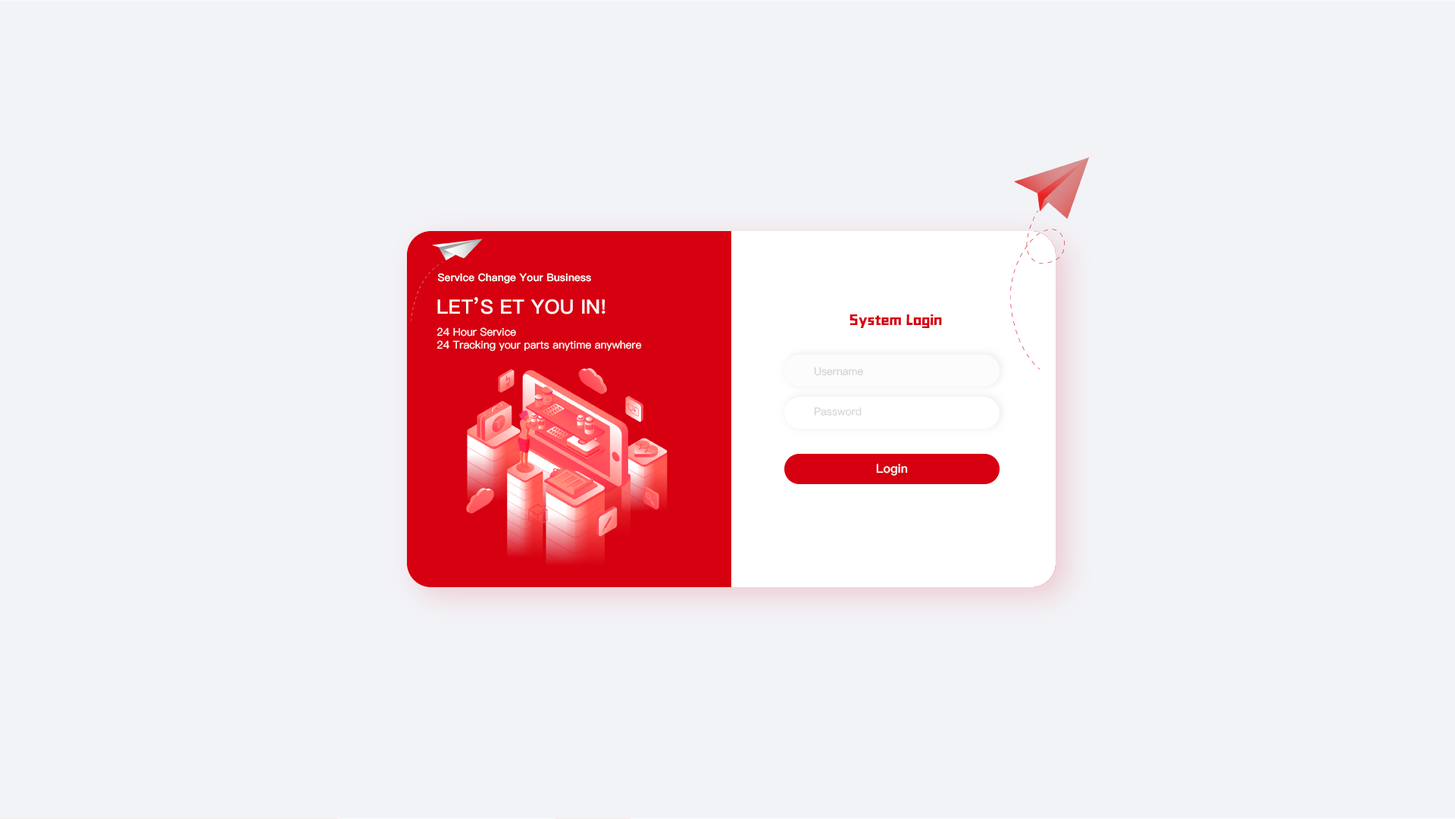
<style>
.page{position:relative;width:1455px;height:819px;background:#f2f3f7}
.page>*{position:absolute;margin:0}
.t1{font:10.5px "PingFang-SC-Heavy";color:#ffffff}
.t2{font:19.7px "PingFang-SC-Heavy";color:#ffffff}
.t3{font:15.2px "zihun143hao-ZKCJH-Heavy";color:#d60010}
.t4{font:10.6px "PingFang-SC-Medium";color:#ffffff}
.t5{font:10.6px "PingFang-SC-Medium";color:#d1d1d1}
.t6{font:10.6px "PingFang-SC-Medium";color:#d4d4d4}
.t7{font:12.1px "PingFang-SC-Bold";color:#ffffff}
</style>
<div class="page">
<p class="t1" style="left:437px;top:273px;width:154px;height:11px">Service Change Your Business</p>
<p class="t2" style="left:437px;top:297px;width:169px;height:18px">LET’S ET YOU IN!</p>
<p class="t3" style="left:850px;top:315px;width:92px;height:13px">System Login</p>
<p class="t4" style="left:437px;top:327px;width:205px;height:25px">24 Hour Service<br>24 Tracking your parts anytime anywhere</p>
<p class="t5" style="left:814px;top:367px;width:49px;height:9px">Username</p>
<p class="t6" style="left:814px;top:407px;width:48px;height:9px">Password</p>
<p class="t7" style="left:876px;top:464px;width:32px;height:12px">Login</p>
</div>
